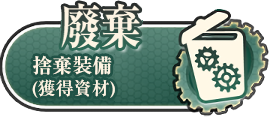
<style>
.page{position:relative;width:270px;height:117px;background:#ffffff}
.page>*{position:absolute;margin:0}
.t1{font:18px/24px "RyuminPr6N-Bold";color:#fef4e3}
.t2{font:20px/24px "RyuminPr6N-ExBold";color:#fef4e3}
</style>
<div class="page">
<p class="t1" style="left:32px;top:55px;width:83px;height:43px"><span class="t2">捨棄裝備<br></span>(獲得資材)</p>
</div>
